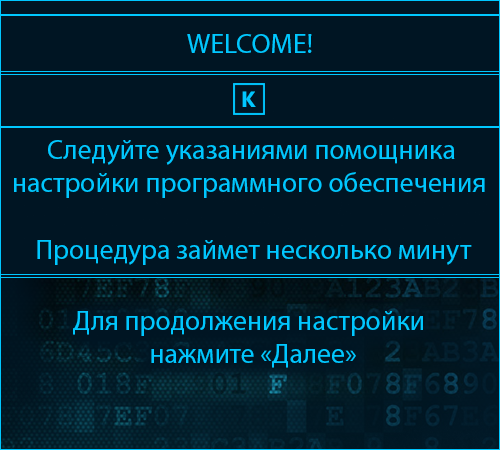
<style>
.page{position:relative;width:500px;height:450px;background:#001523}
.page>*{position:absolute;margin:0}
.t1{font:27.8px "MyriadPro-Regular";color:#00c7ff}
.t2{font:22.2px "NirmalaUI-Bold";color:#00c7ff}
</style>
<div class="page">
<p class="t1" style="left:187px;top:34px;width:125px;height:19px">WELCOME!</p>
<p class="t2" style="left:242px;top:91px;width:14px;height:16px">K</p>
<p class="t1" style="left:14px;top:140px;width:471px;height:125px">Следуйте указаниями помощника<br>  настройки программного обеспечения<br><br>      Процедура займет несколько минут</p>
<p class="t1" style="left:73px;top:311px;width:350px;height:57px">Для продолжения настройки<br>             нажмите «Далее»</p>
</div>
